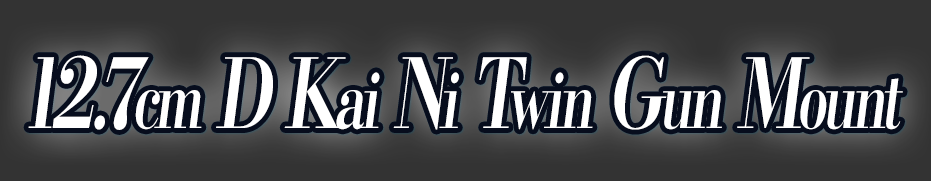
<style>
.page{position:relative;width:931px;height:181px;background:#333333}
.page>*{position:absolute;margin:0}
.t1{font:96px "KochoStd-Heavy";letter-spacing:-0.08em;color:#ffffff;font-style:italic;scale:0.72 1}
.t2{font:76.8px "KochoStd-Heavy";letter-spacing:-0.08em;color:#ffffff;font-style:italic;scale:0.72 1}
</style>
<div class="page">
<p class="t1" style="left:28px;top:55px;width:875px;height:75px">12.7<span class="t2">cm</span> D K<span class="t2">ai</span> N<span class="t2">i</span> T<span class="t2">win</span> G<span class="t2">un</span> M<span class="t2">ount</span></p>
</div>
